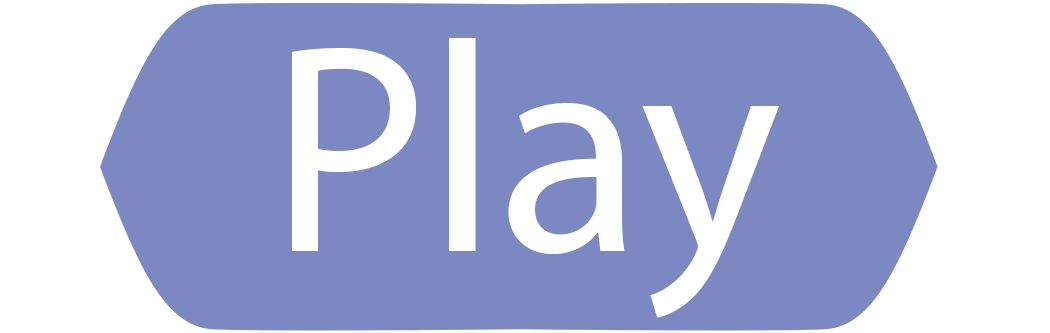
<style>
.page{position:relative;width:1050px;height:333px;background:#7b88c2}
.page>*{position:absolute;margin:0}
.t1{font:300px "MyriadPro-Regular";color:#ffffff}
</style>
<div class="page">
<p class="t1" style="left:292px;top:38px;width:487px;height:280px">Play</p>
</div>
